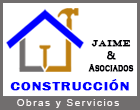
<style>
.page{position:relative;width:140px;height:110px;background:#ffffff}
.page>*{position:absolute;margin:0}
.t1{font:10px "CopperplateGothic-Bold";letter-spacing:0.03em;color:#000004;font-weight:bold;scale:0.7 1}
.t2{font:9px "EngraversMT";letter-spacing:0.03em;color:#000004;font-weight:bold}
.t3{font:11px "MicrosoftNewTaiLue";letter-spacing:0.03em;color:#000004;font-weight:bold}
.t4{font:11px "FranklinGothic-Demi";letter-spacing:0.03em;color:#0000ff;font-weight:bold;scale:1.4 1}
.t5{font:10px "ArialMT";letter-spacing:0.15em;color:#faf6f6}
</style>
<div class="page">
<p class="t1" style="left:88px;top:40px;width:46px;height:32px;text-align:center"><span class="t2">JAIME<br></span><span class="t3">&amp;<br></span>Asociados</p>
<p class="t4" style="left:10px;top:79px;width:119px;height:12px">CONSTRUCCIÓN</p>
<p class="t5" style="left:17px;top:99px;width:102px;height:9px">Obras y Servicios</p>
</div>
